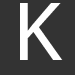
<style>
.page{position:relative;width:75px;height:75px;background:#333333}
.page>*{position:absolute;margin:0}
.t1{font:84.2px "MyriadPro-Regular";color:#ffffff;scale:1.05 1}
</style>
<div class="page">
<p class="t1" style="left:20px;top:3px;width:43px;height:57px">K</p>
</div>
